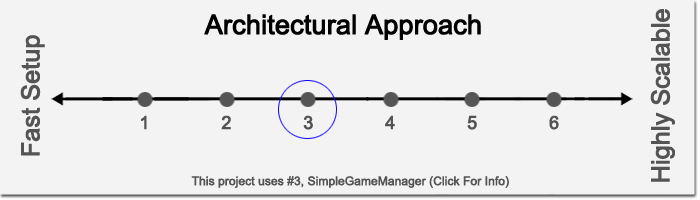
<style>
.page{position:relative;width:700px;height:200px;background:#f3f3f3}
.page>*{position:absolute;margin:0}
.t1{font:25px "ArialMT";letter-spacing:-0.02em;color:#545454;font-weight:bold}
.t2{font:27px "ArialMT";letter-spacing:-0.02em;color:#000000;font-weight:bold}
.t3{font:18px "ArialMT";letter-spacing:-0.02em;color:#545454;font-weight:bold}
.t4{font:12px "ArialMT";letter-spacing:-0.02em;color:#545454;font-weight:bold}
</style>
<div class="page">
<p class="t1" style="left:20px;top:9px;width:655px;height:173px;text-align:center;rotate:-90deg">Fast Setup<br>  <br><br><br><br><br><br><br> <br><br><br><br><br><br><br><br><br><br><br><br>  <br>Highly Scalable</p>
<p class="t2" style="left:204px;top:14px;width:277px;height:26px">Architectural Approach</p>
<p class="t3" style="left:141px;top:115px;width:418px;height:15px">1              2              3              4              5              6</p>
<p class="t4" style="left:191px;top:176px;width:318px;height:12px"><span class="t3"><br></span><br><br>This project uses #3, SimpleGameManager (Click For Info)</p>
</div>
